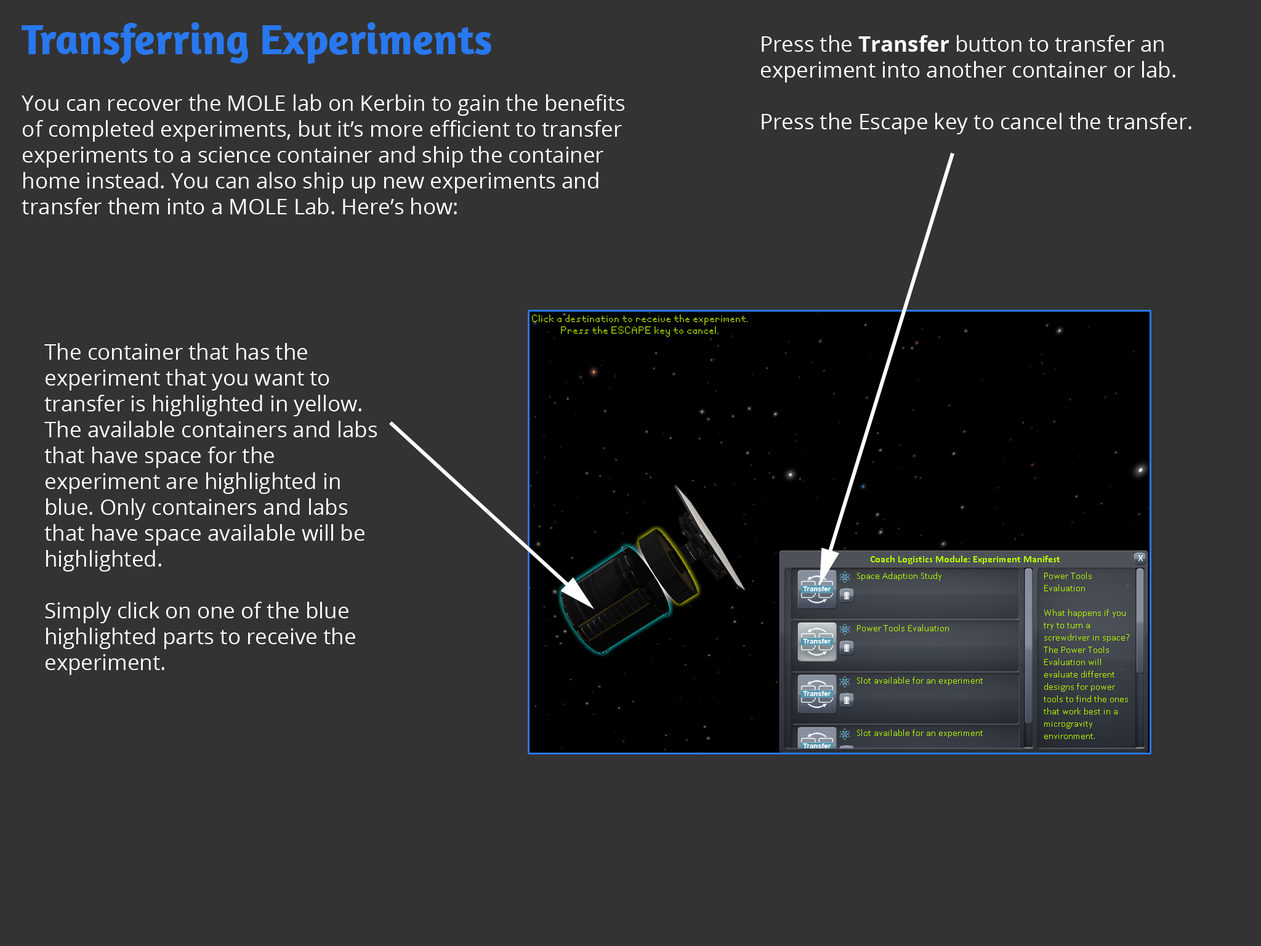
<style>
.page{position:relative;width:1261px;height:946px;background:#333333}
.page>*{position:absolute;margin:0}
.t1{font:43.1px "Amaranth-Bold";color:#2978ef}
.t2{font:21.5px "OpenSans";color:#ffffff}
.t3{font:21.5px "OpenSans-Bold";color:#ffffff}
</style>
<div class="page">
<p class="t1" style="left:22px;top:22px;width:469px;height:42px">Transferring Experiments</p>
<p class="t2" style="left:761px;top:35px;width:430px;height:99px">Press the <span class="t3">Transfer </span>button to transfer an experiment into another container or lab.<br><br>Press the Escape key to cancel the transfer.</p>
<p class="t2" style="left:22px;top:94px;width:603px;height:120px">You can recover the MOLE lab on Kerbin to gain the benefits of completed experiments, but it’s more efficient to transfer experiments to a science container and ship the container home instead. You can also ship up new experiments and transfer them into a MOLE Lab. Here’s how:</p>
<p class="t2" style="left:44px;top:343px;width:333px;height:332px">The container that has the experiment that you want to transfer is highlighted in yellow. The available containers and labs that have space for the experiment are highlighted in blue. Only containers and labs that have space available will be highlighted.<br><br>Simply click on one of the blue highlighted parts to receive the experiment.</p>
</div>
